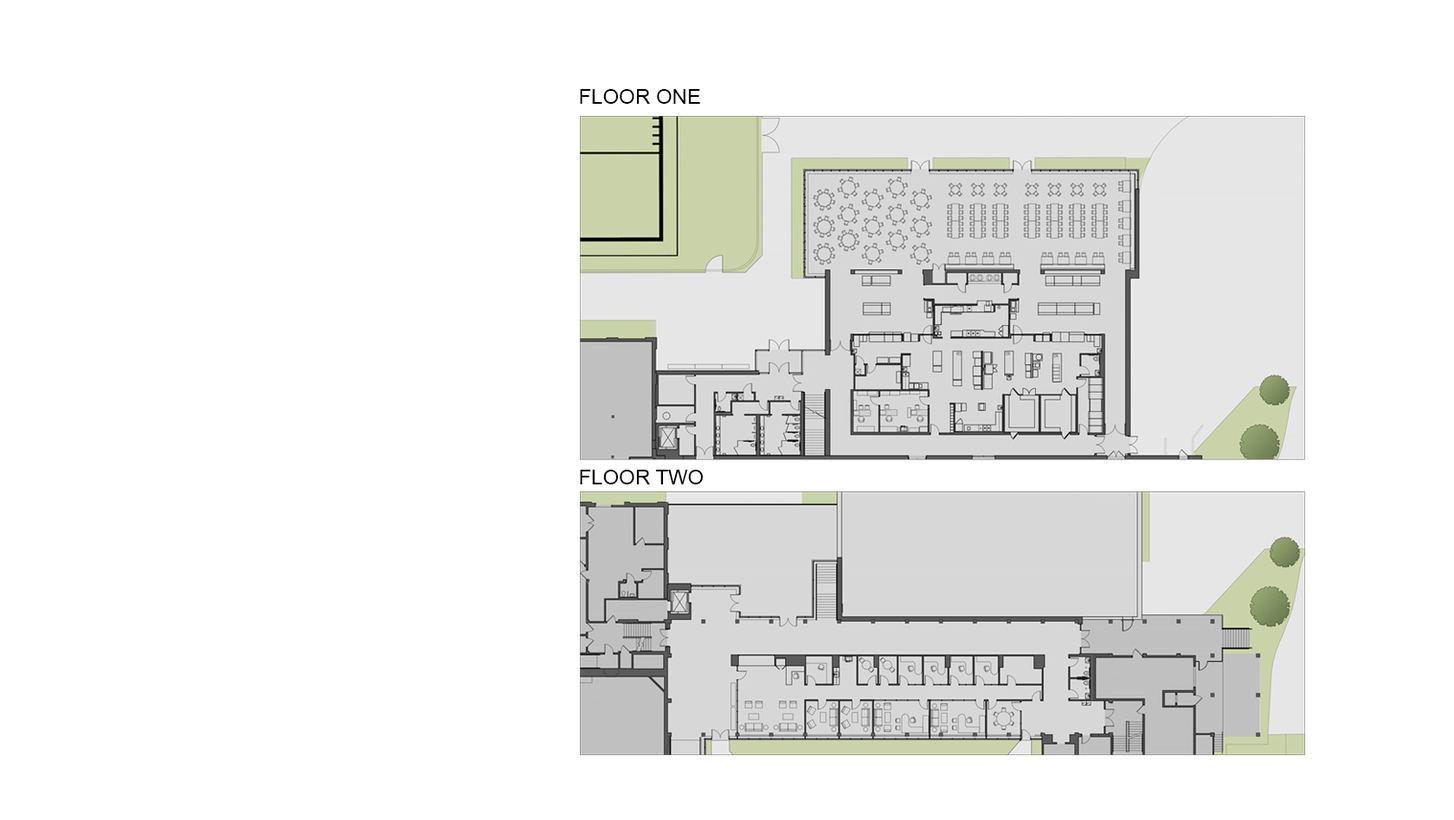
<style>
.page{position:relative;width:1454px;height:820px;background:#ffffff}
.page>*{position:absolute;margin:0}
.t1{font:20.8px "ArialMT";color:#000000}
</style>
<div class="page">
<p class="t1" style="left:580px;top:89px;width:120px;height:15px">FLOOR ONE</p>
<p class="t1" style="left:580px;top:470px;width:123px;height:15px">FLOOR TWO</p>
</div>
